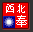
<style>
.page{position:relative;width:33px;height:32px;background:#f20000}
.page>*{position:absolute;margin:0}
.t1{font:10.4px "SimSun";color:#ffffff}
.t2{font:11.7px "SimSun";color:#ffffff}
</style>
<div class="page">
<p class="t1" style="left:6px;top:4px;width:19px;height:9px">西北</p>
<p class="t2" style="left:16px;top:15px;width:11px;height:12px">奉</p>
</div>
